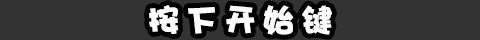
<style>
.page{position:relative;width:480px;height:40px;background:#333333}
.page>*{position:absolute;margin:0}
.t1{font:32px "DFPHaiBaoW12";letter-spacing:0.2em;color:#ffffff}
</style>
<div class="page">
<p class="t1" style="left:149px;top:5px;width:183px;height:30px">按下开始键</p>
</div>
